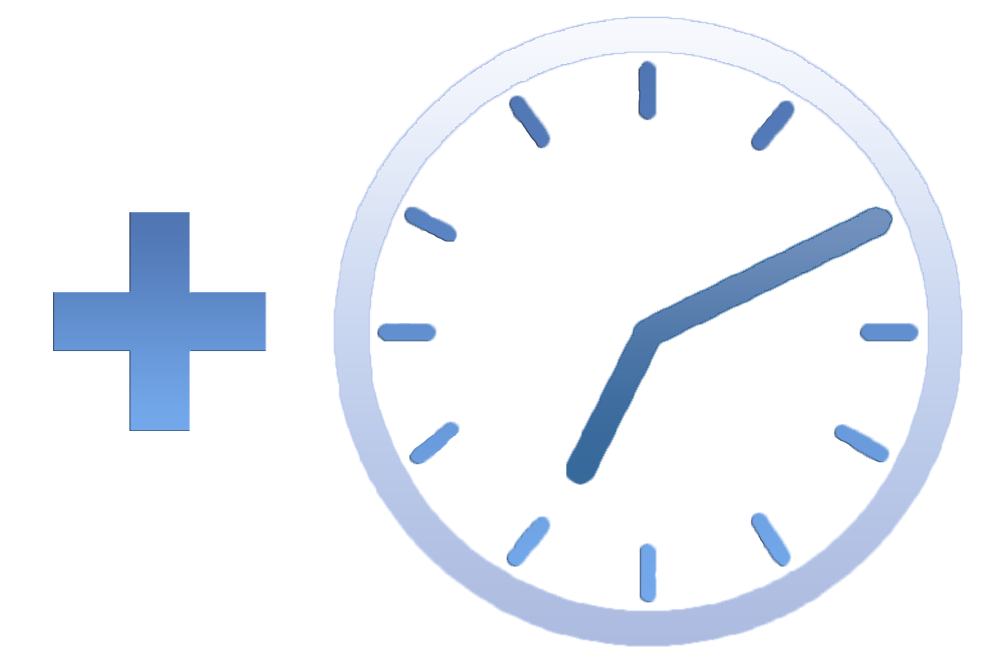
<style>
.page{position:relative;width:993px;height:666px;background:#ffffff}
.page>*{position:absolute;margin:0}
.t1{font:426.8px "Bauhaus93";color:#618fcf}
</style>
<div class="page">
<p class="t1" style="left:53px;top:212px;width:214px;height:219px">+</p>
</div>
